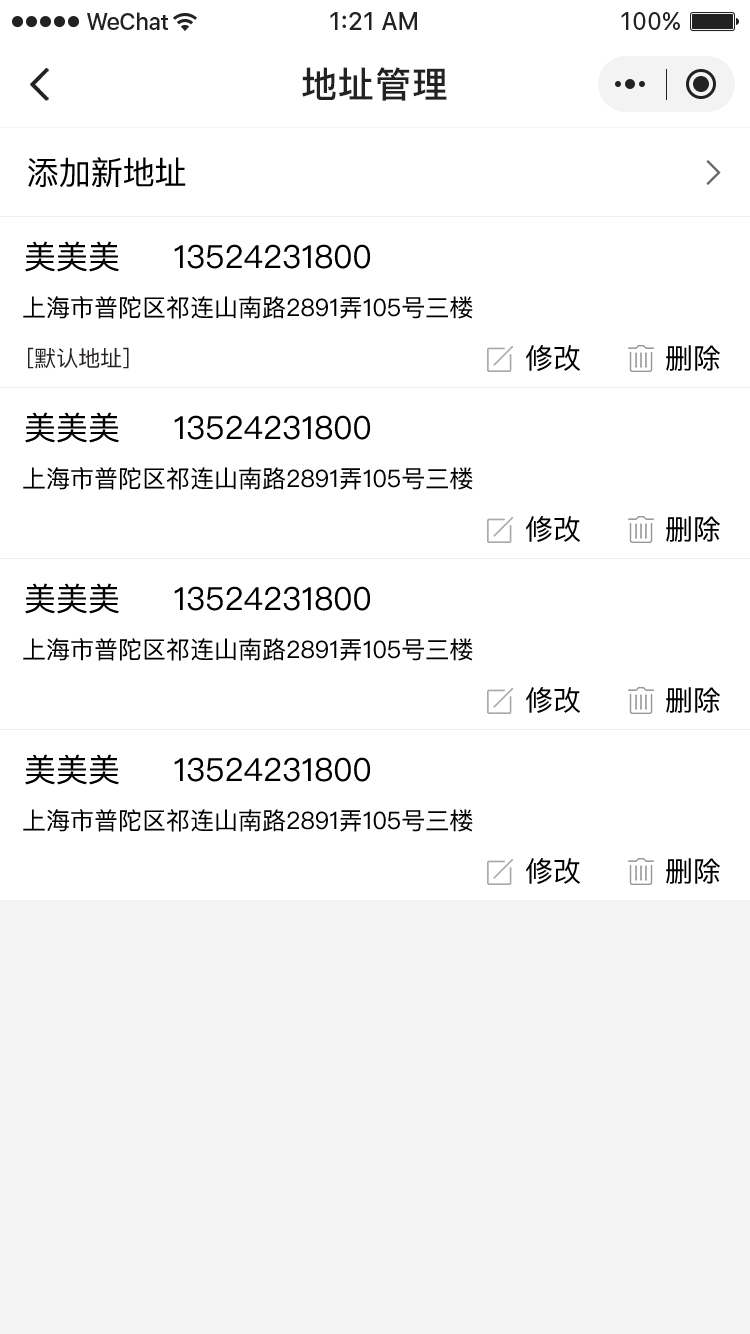
<style>
.page{position:relative;width:750px;height:1334px;background:#ffffff}
.page>*{position:absolute;margin:0}
.t1{font:36px "PingFang-SC-Bold";letter-spacing:0.028em;color:#222222}
.t2{font:32px "PingFangSC-Regular";color:#000000}
.t3{font:24px "PingFangSC-Regular";color:#000000}
.t4{font:22px "PingFangSC-Regular";color:#282425}
.t5{font:28px "PingFangSC-Regular";color:#000000}
</style>
<div class="page">
<p class="t1" style="left:302px;top:67px;width:145px;height:34px">地址管理</p>
<p class="t2" style="left:28px;top:157px;width:158px;height:30px">添加新地址</p>
<p class="t2" style="left:25px;top:241px;width:345px;height:31px">美美美     13524231800</p>
<p class="t3" style="left:23px;top:296px;width:450px;height:23px">上海市普陀区祁连山南路2891弄105号三楼</p>
<p class="t4" style="left:28px;top:347px;width:101px;height:22px">[默认地址]</p>
<p class="t5" style="left:526px;top:345px;width:54px;height:26px">修改</p>
<p class="t5" style="left:666px;top:345px;width:54px;height:26px">删除</p>
<p class="t2" style="left:25px;top:412px;width:345px;height:31px">美美美     13524231800</p>
<p class="t3" style="left:23px;top:467px;width:450px;height:23px">上海市普陀区祁连山南路2891弄105号三楼</p>
<p class="t5" style="left:526px;top:516px;width:54px;height:26px">修改</p>
<p class="t5" style="left:666px;top:516px;width:54px;height:26px">删除</p>
<p class="t2" style="left:25px;top:583px;width:345px;height:31px">美美美     13524231800</p>
<p class="t3" style="left:23px;top:638px;width:450px;height:23px">上海市普陀区祁连山南路2891弄105号三楼</p>
<p class="t5" style="left:526px;top:687px;width:54px;height:26px">修改</p>
<p class="t5" style="left:666px;top:687px;width:54px;height:26px">删除</p>
<p class="t2" style="left:25px;top:754px;width:345px;height:31px">美美美     13524231800</p>
<p class="t3" style="left:23px;top:809px;width:450px;height:23px">上海市普陀区祁连山南路2891弄105号三楼</p>
<p class="t5" style="left:526px;top:858px;width:54px;height:26px">修改</p>
<p class="t5" style="left:666px;top:858px;width:54px;height:26px">删除</p>
</div>
